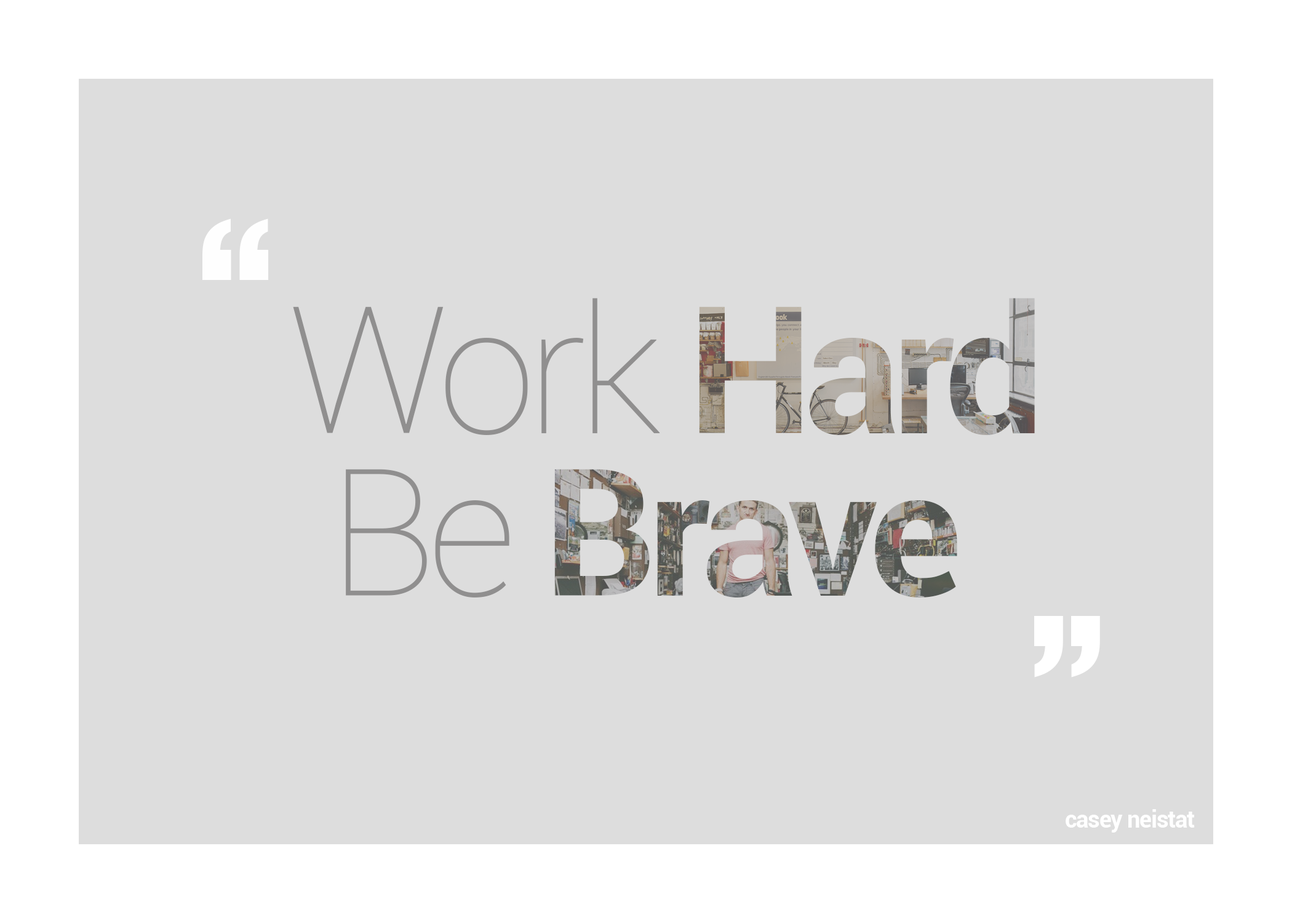
<style>
.page{position:relative;width:1292px;height:923px;background:#dddddd}
.page>*{position:absolute;margin:0}
.t1{font:179.5px "AkzidenzGroteskBE-Bold";letter-spacing:-0.045em;color:#fefefe}
.t2{font:176.9px/162.4px "Roboto-Bold";letter-spacing:-0.045em}
.t3{font:176.9px/162.4px "Roboto-Thin";letter-spacing:-0.045em}
.t4{font:179.5px "AkzidenzGroteskBE-Bold";letter-spacing:-0.045em;color:#ffffff}
.t5{font:23.1px "Roboto-Bold";letter-spacing:-0.025em;color:#ffffff}
</style>
<div class="page">
<p class="t1" style="left:202px;top:218px;width:66px;height:62px;rotate:180deg">,,</p>
<p class="t2" style="left:293px;top:298px;width:742px;height:299px;text-align:center"><span class="t3">Work </span>Hard<span class="t3"> <br>Be </span>Brave</p>
<p class="t4" style="left:1034px;top:616px;width:66px;height:61px">,,</p>
<p class="t5" style="left:1066px;top:809px;width:129px;height:23px">casey neistat</p>
</div>
